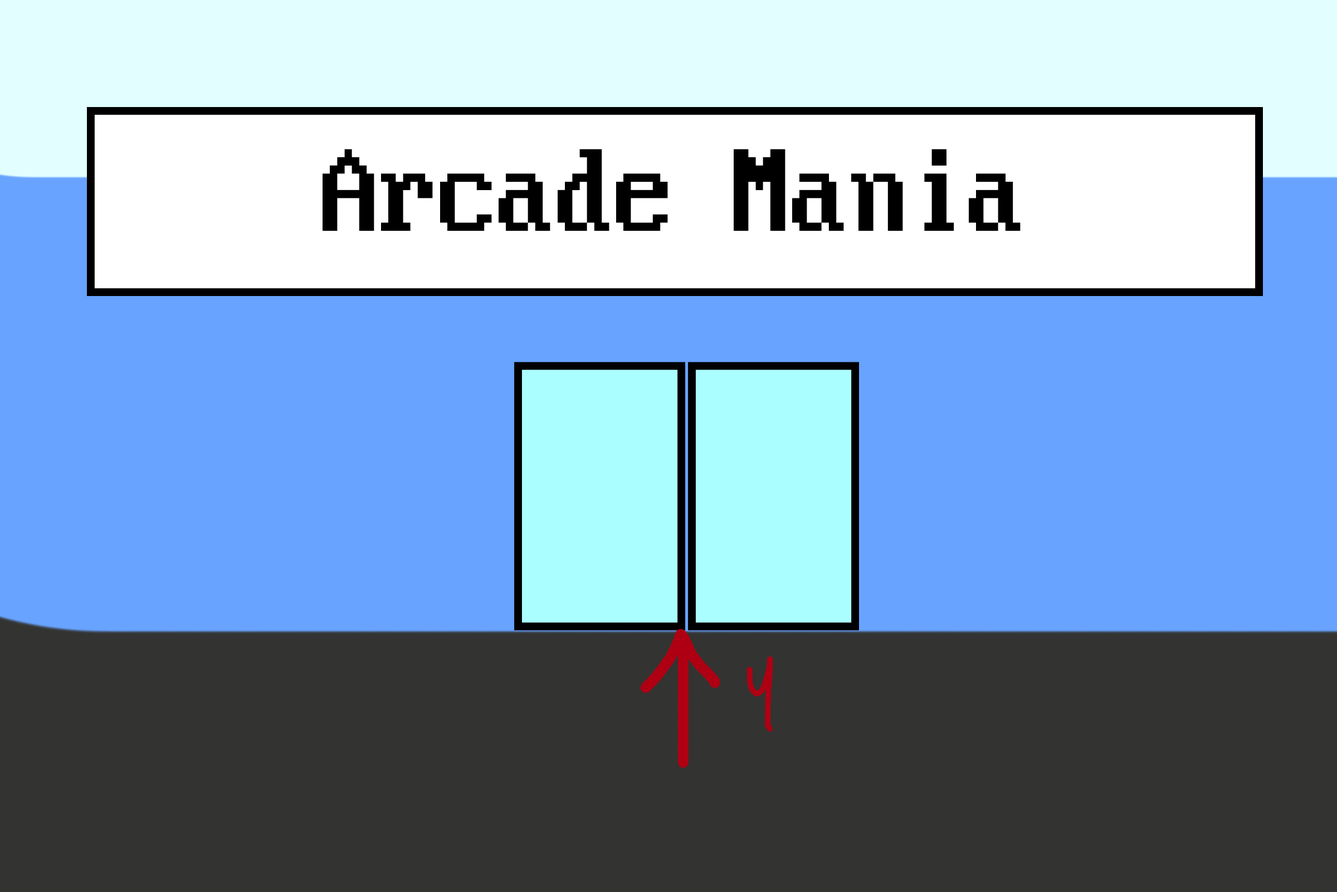
<style>
.page{position:relative;width:1337px;height:892px;background:#67a3ff}
.page>*{position:absolute;margin:0}
.t1{font:167.2px "ClassicConsole";color:#000000;scale:0.9 1}
</style>
<div class="page">
<p class="t1" style="left:323px;top:149px;width:698px;height:82px">Arcade Mania</p>
</div>
